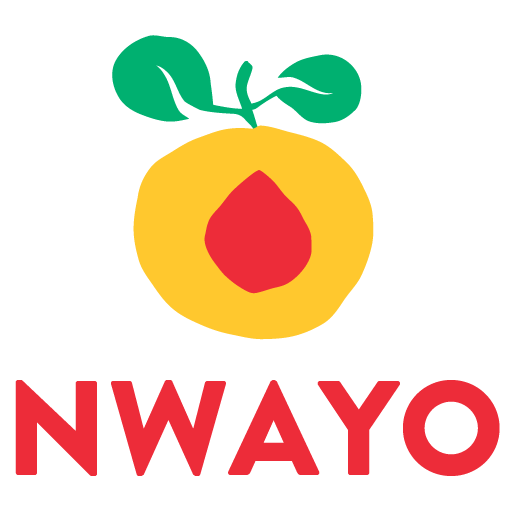
<style>
.page{position:relative;width:512px;height:512px;background:#ffffff}
.page>*{position:absolute;margin:0}
.t1{font:135px "BrandonGrotesque-Black";color:#ed2c39;text-transform:uppercase}
</style>
<div class="page">
<p class="t1" style="left:15px;top:380px;width:485px;height:96px">nwayo</p>
</div>
